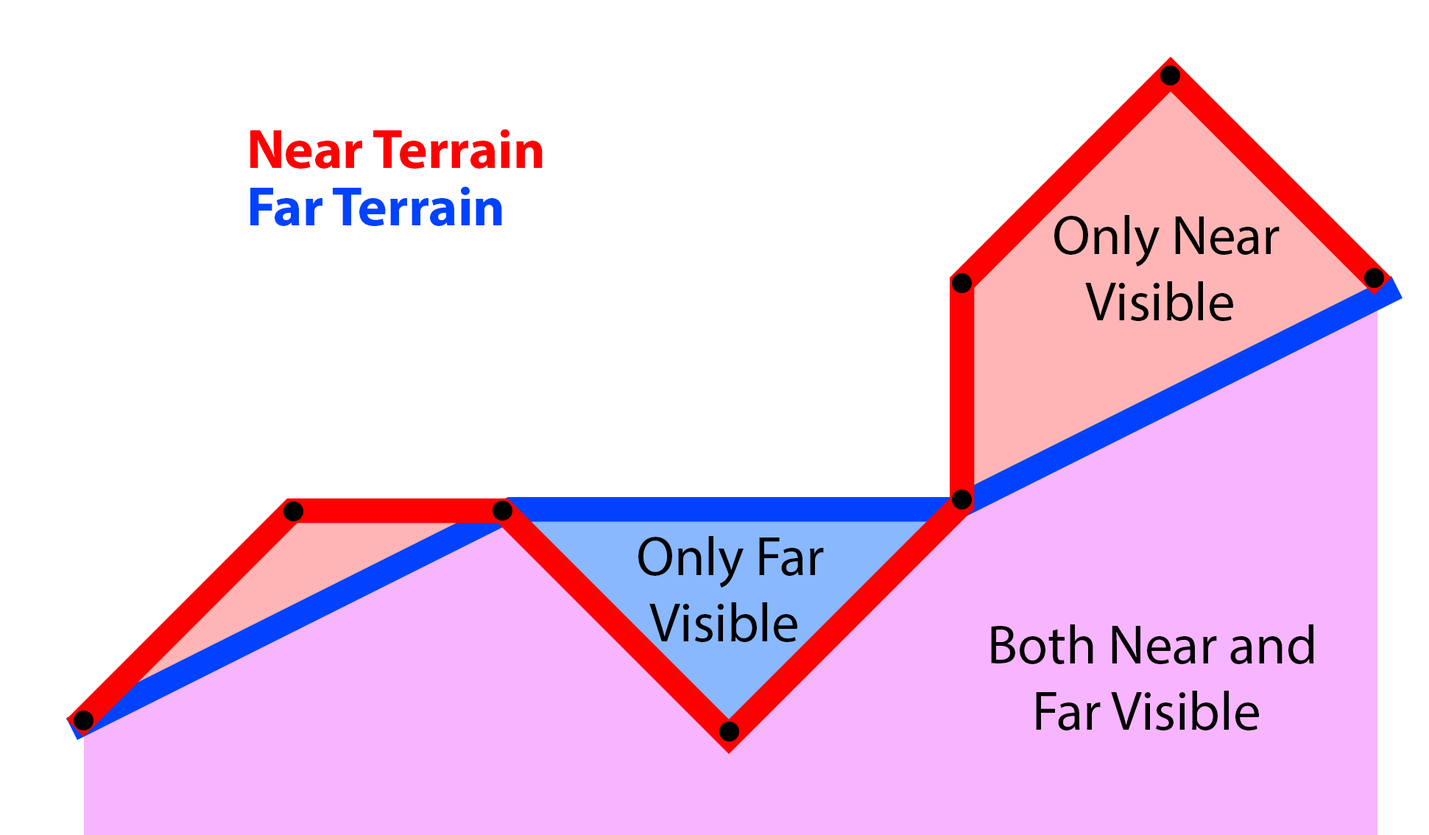
<style>
.page{position:relative;width:1429px;height:835px;background:#ffffff}
.page>*{position:absolute;margin:0}
.t1{font:55.2px "MyriadPro-Bold";color:#ff0000}
.t2{font:55.2px "MyriadPro-Bold";color:#0042ff}
.t3{font:55.2px "MyriadPro-Regular";color:#000000}
</style>
<div class="page">
<p class="t1" style="left:250px;top:129px;width:292px;height:40px">Near Terrain</p>
<p class="t2" style="left:250px;top:186px;width:252px;height:40px">Far Terrain</p>
<p class="t3" style="left:1054px;top:215px;width:225px;height:106px;text-align:center">Only Near<br>Visible</p>
<p class="t3" style="left:638px;top:536px;width:186px;height:106px;text-align:center">Only Far<br>Visible</p>
<p class="t3" style="left:991px;top:624px;width:323px;height:106px;text-align:center">Both Near and<br>Far Visible</p>
</div>
